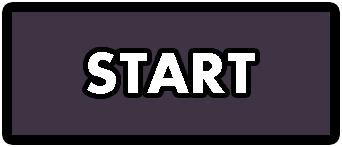
<style>
.page{position:relative;width:342px;height:147px;background:#3e3443}
.page>*{position:absolute;margin:0}
.t1{font:60px "AharoniBold";color:#ffffff}
</style>
<div class="page">
<p class="t1" style="left:87px;top:52px;width:168px;height:42px">START</p>
</div>
